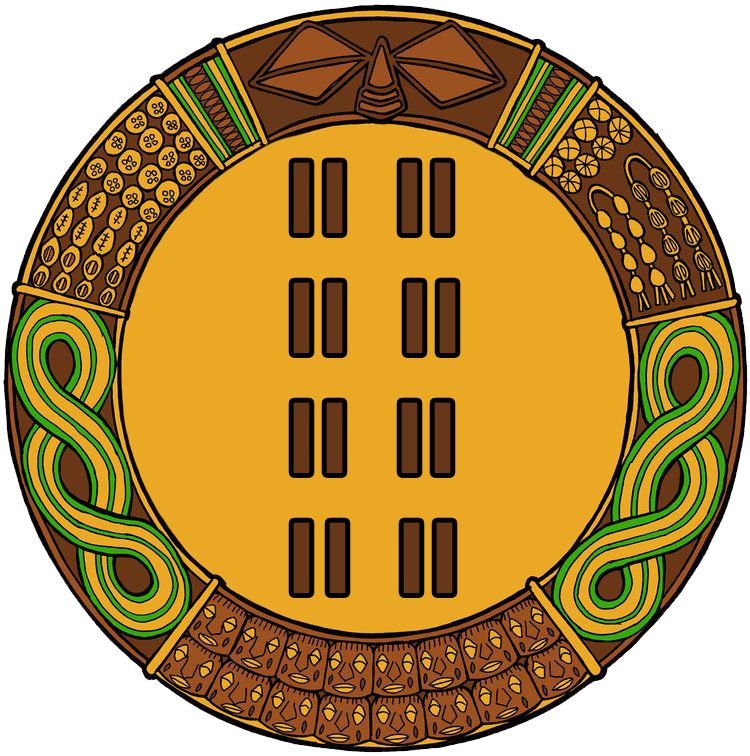
<style>
.page{position:relative;width:750px;height:756px;background:#eba825}
.page>*{position:absolute;margin:0}
.t1{font:100px "TTNorms-Bold";color:#663719}
</style>
<div class="page">
<p class="t1" style="left:293px;top:162px;width:163px;height:431px">II   II<br>II   II<br>II  II<br>I I  II</p>
</div>
